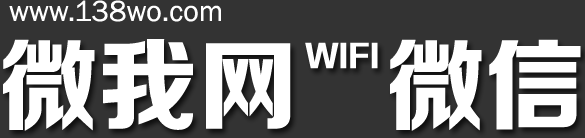
<style>
.page{position:relative;width:585px;height:138px;background:#333333}
.page>*{position:absolute;margin:0}
.t1{font:30px "FranklinGothic-Book";color:#ffffff}
.t2{font:100px "FZZDHJW--GB1-0";color:#ffffff}
.t3{font:30px "FZZDHJW--GB1-0";color:#ffffff}
</style>
<div class="page">
<p class="t1" style="left:9px;top:0px;width:212px;height:22px">www.138wo.com</p>
<p class="t2" style="left:3px;top:39px;width:288px;height:92px">微我网</p>
<p class="t2" style="left:390px;top:39px;width:191px;height:92px">微信</p>
<p class="t3" style="left:305px;top:42px;width:73px;height:27px">WIFI</p>
</div>
